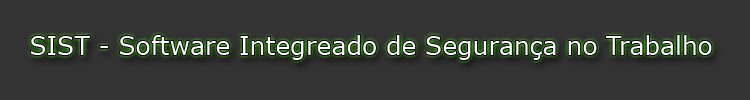
<style>
.page{position:relative;width:750px;height:100px;background:#333333}
.page>*{position:absolute;margin:0}
.t1{font:25px "Verdana";color:#ffffff}
</style>
<div class="page">
<p class="t1" style="left:31px;top:35px;width:681px;height:25px">SIST - Software Integreado de Segurança no Trabalho</p>
</div>
